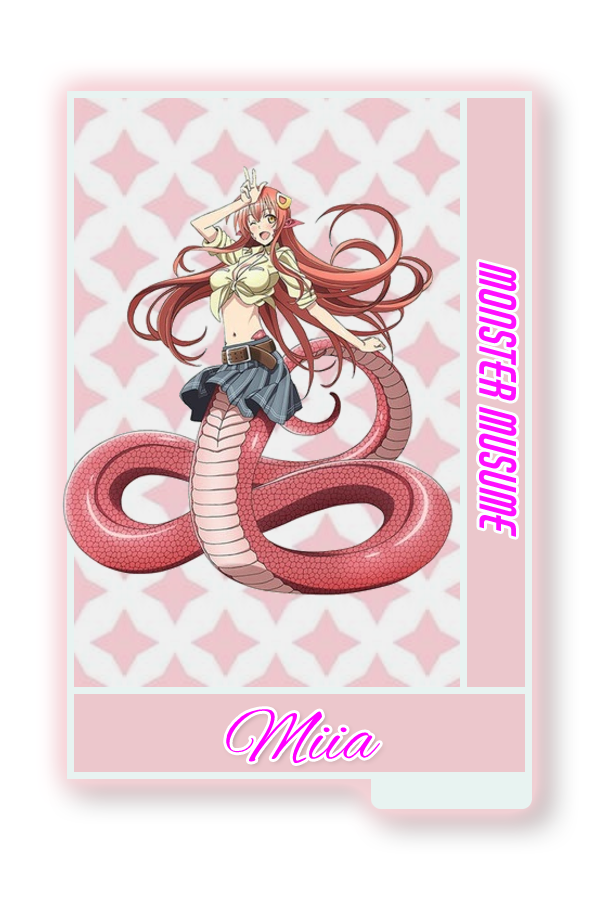
<style>
.page{position:relative;width:600px;height:900px;background:#ffffff}
.page>*{position:absolute;margin:0}
.t1{font:48.8px "AirAmerica-Regular";color:#ff0fff}
.t2{font:75px "AlexBrush-Regular";color:#ff00ff}
</style>
<div class="page">
<p class="t1" style="left:478px;top:261px;width:39px;height:276px;rotate:90deg">Monster Musume</p>
<p class="t2" style="left:226px;top:709px;width:154px;height:55px">Miia</p>
</div>
